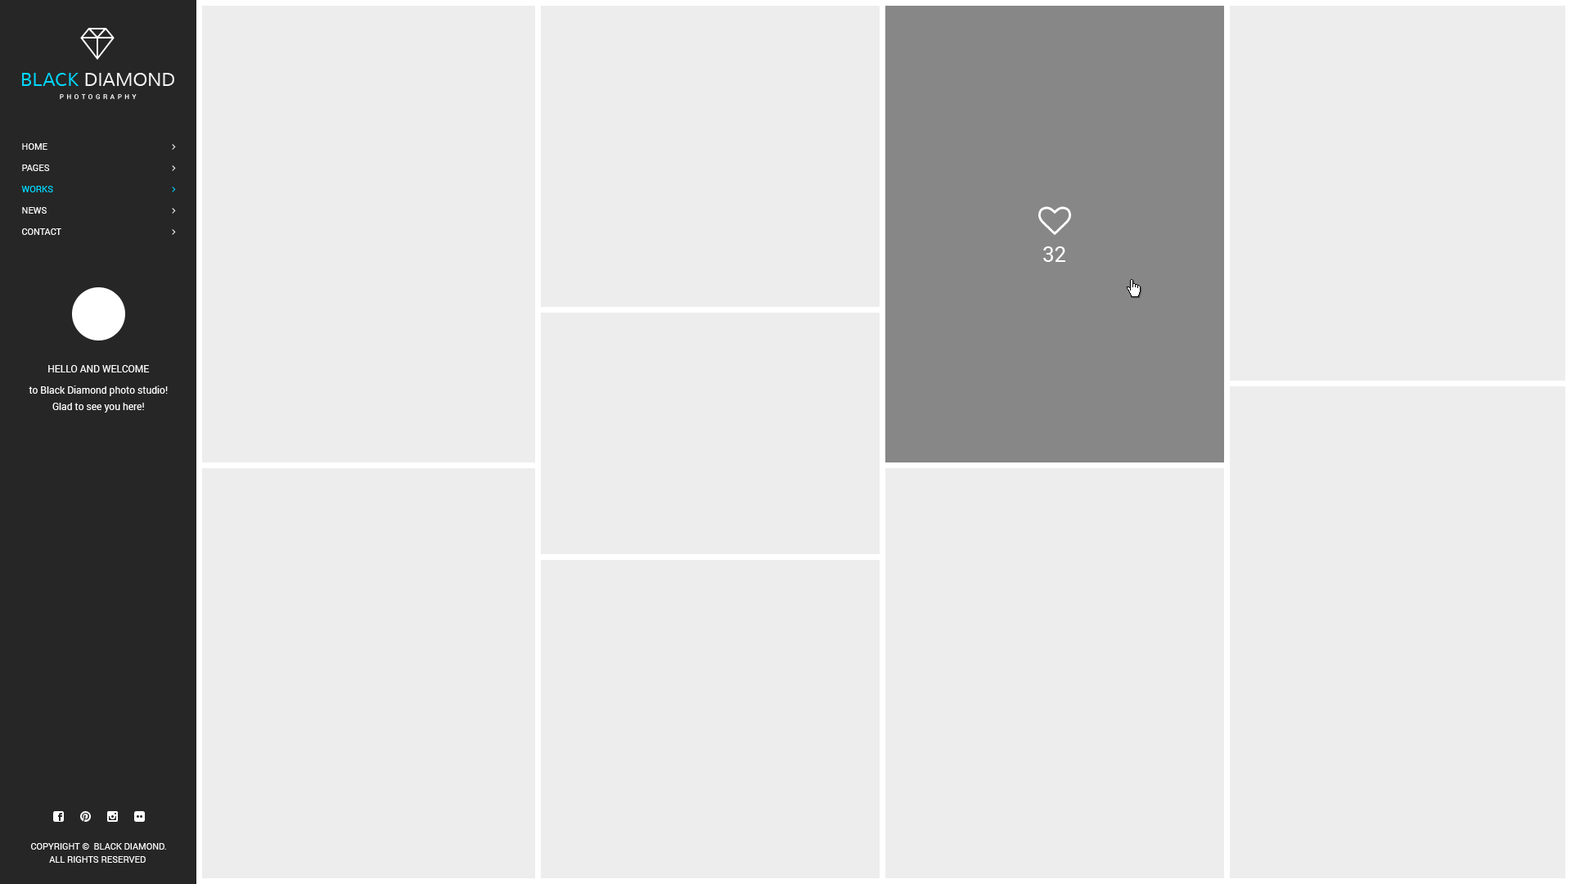
<style>
.page{position:relative;width:1571px;height:884px;background:#ededed}
.page>*{position:absolute;margin:0}
.t1{font:9px/21.3px "Roboto-Regular";color:#ffffff;text-transform:uppercase}
.t2{font:9px/21.3px "Roboto-Regular";color:#00d8ff;text-transform:uppercase}
.t3{font:9.8px/16.4px "Roboto-Regular";color:#ffffff}
.t4{font:9.8px/16.4px "Roboto-Regular";color:#ffffff;text-transform:uppercase}
.t5{font:9.8px/21.3px "Roboto-Regular";color:#ffffff}
.t6{font:9px/13.1px "Roboto-Regular";color:#ffffff;text-transform:uppercase}
</style>
<div class="page">
<p class="t1" style="left:21px;top:143px;width:40px;height:92px">home<br>Pages<br><span class="t2">Works<br></span>News<br>Contact</p>
<p class="t3" style="left:29px;top:365px;width:139px;height:47px;text-align:center"><span class="t4">Hello And Welcome<br></span><span class="t5">t</span>o Black Diamond photo studio!<br>Glad to see you here!</p>
<p class="t6" style="left:31px;top:843px;width:135px;height:19px;text-align:center">Copyright ©  Black Diamond.<br>All Rights Reserved</p>
</div>
